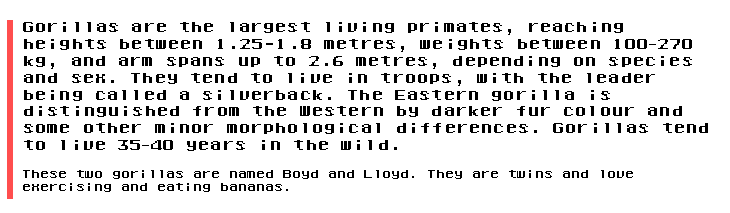
<style>
.page{position:relative;width:730px;height:213px;background:#ffffff}
.page>*{position:absolute;margin:0}
.t1{font:14px "Ponderosa";color:#000000}
.t2{font:14px "KozGoPr6N-Regular";color:#000000}
.t3{font:11px "Ponderosa";color:#000000}
</style>
<div class="page">
<p class="t1" style="left:23px;top:22px;width:685px;height:129px">Gorillas are the largest living primates, reaching <br>heights between 1.25-1.8 metres, weights between 100<span class="t2">–</span>270 <br>kg, and arm spans up to 2.6 metres, depending on species <br>and sex. They tend to live in troops, with the leader <br>being called a silverback. The Eastern gorilla is <br>distinguished from the Western by darker fur colour and <br>some other minor morphological differences. Gorillas tend <br>to live 35<span class="t2">–</span>40 years in the wild.</p>
<p class="t3" style="left:23px;top:170px;width:610px;height:22px">These two gorillas are named Boyd and Lloyd. They are twins and love<br>exercising and eating bananas.</p>
</div>
